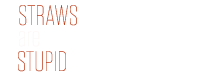
<style>
.page{position:relative;width:198px;height:76px;background:#ffffff}
.page>*{position:absolute;margin:0}
.t1{font:28px "Tungsten-Thin";color:#be3f1c}
.t2{font:28px "Tungsten-Thin";color:#fcf7f6}
.t3{font:28px "Tungsten-Thin"}
</style>
<div class="page">
<p class="t1" style="left:19px;top:5px;width:58px;height:21px">STRAWS</p>
<p class="t2" style="left:19px;top:31px;width:21px;height:16px">are</p>
<p class="t3" style="left:18px;top:51px;width:48px;height:21px">STUPID</p>
</div>
